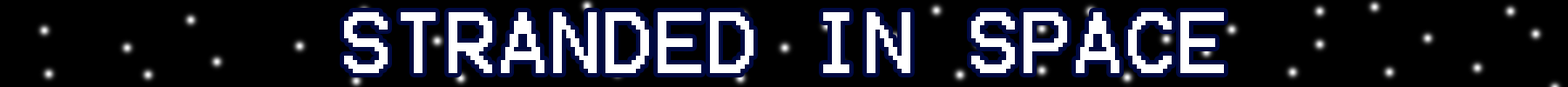
<style>
.page{position:relative;width:1568px;height:87px;background:#000000}
.page>*{position:absolute;margin:0}
.t1{font:69.7px "Terminal";color:#ffffff}
</style>
<div class="page">
<p class="t1" style="left:344px;top:12px;width:880px;height:61px">STRANDED IN SPACE</p>
</div>
